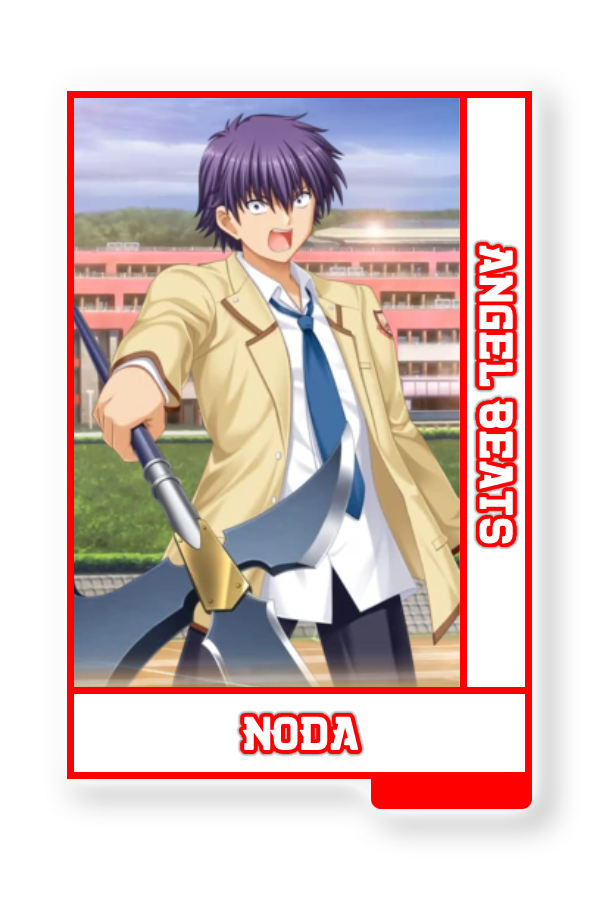
<style>
.page{position:relative;width:600px;height:900px;background:#ffffff}
.page>*{position:absolute;margin:0}
.t1{font:48.8px "KillerCollege";color:#ffffff}
.t2{font:48.6px "KillerCollege";color:#ffffff}
</style>
<div class="page">
<p class="t1" style="left:479px;top:245px;width:34px;height:299px;rotate:90deg">Angel Beats</p>
<p class="t2" style="left:242px;top:716px;width:117px;height:35px">NODA</p>
</div>
